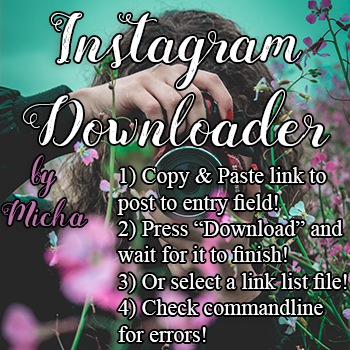
<style>
.page{position:relative;width:350px;height:350px}
.page>*{position:absolute;margin:0}
.t1{font:70px "MightypeScript";color:#ffffff}
.t2{font:35px "MightypeScript";color:#bf75ac}
.t3{font:22px "TimesNewRomanPSMT";color:#ffffff}
</style>
<div class="page">
<p class="t1" style="left:23px;top:12px;width:307px;height:135px;text-align:center">Instagram <br>Downloader</p>
<p class="t2" style="left:2px;top:155px;width:85px;height:72px;text-align:center">by<br>Micha</p>
<p class="t3" style="left:117px;top:167px;width:230px;height:175px">1) Copy &amp; Paste link to post to entry field!<br>2) Press “Download” and wait for it to finish!<br>3) Or select a link list file!<br>4) Check commandline for errors!</p>
</div>
